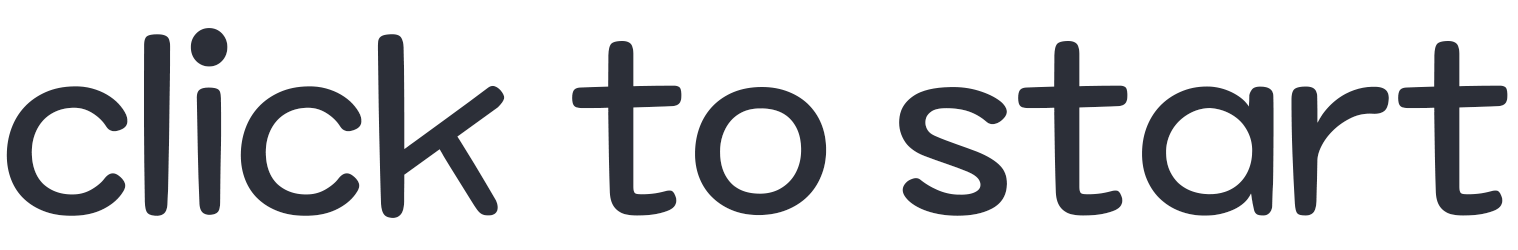
<style>
.page{position:relative;width:1518px;height:250px;background:#ffffff}
.page>*{position:absolute;margin:0}
.t1{font:240px "MaplestoryLight";letter-spacing:-0.02em;color:#2c2f38}
</style>
<div class="page">
<p class="t1" style="left:6px;top:28px;width:1502px;height:190px">click to start</p>
<p class="t1" style="left:10px;top:32px;width:1502px;height:190px">click to start</p>
</div>
